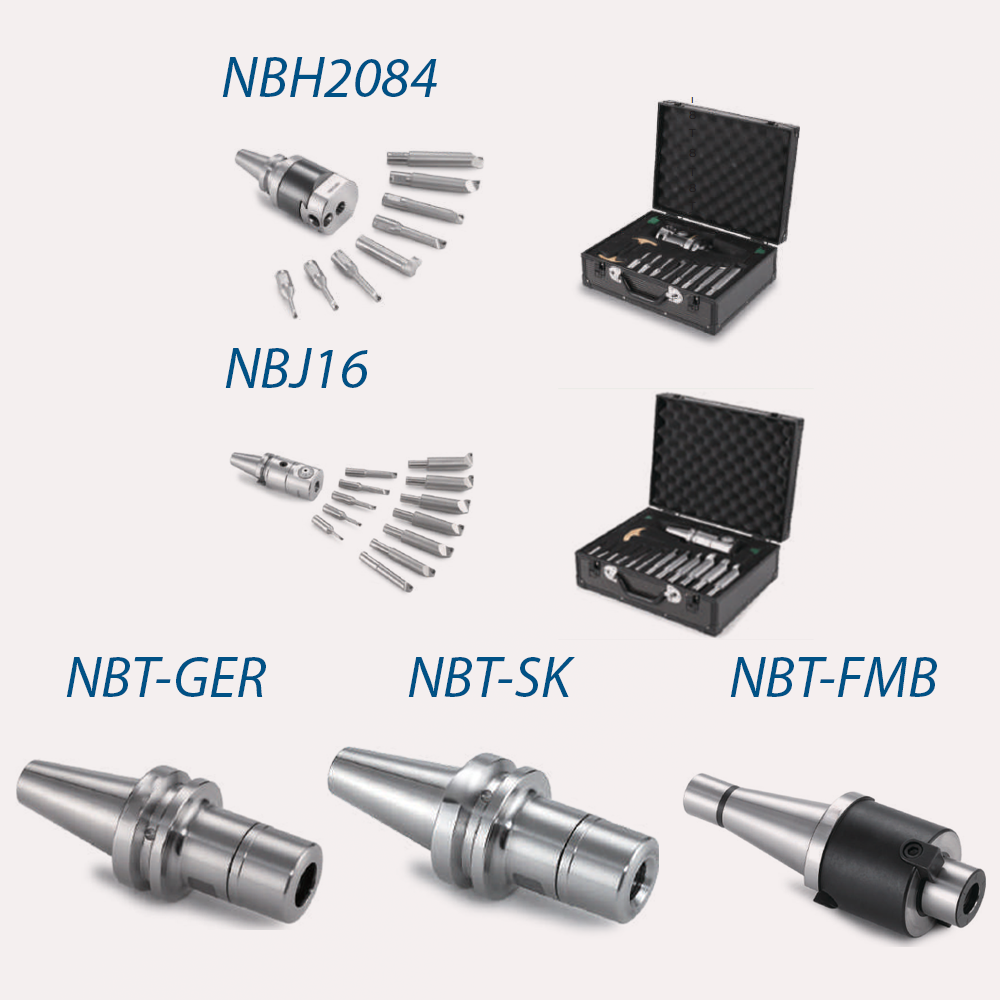
<style>
.page{position:relative;width:1000px;height:1000px;background:#f4efef}
.page>*{position:absolute;margin:0}
.t1{font:57.8px "MyriadPro-It";color:#005185}
</style>
<div class="page">
<p class="t1" style="left:222px;top:57px;width:215px;height:40px">NBH2084</p>
<p class="t1" style="left:225px;top:348px;width:143px;height:40px">NBJ16</p>
<p class="t1" style="left:66px;top:657px;width:200px;height:40px">NBT-GER</p>
<p class="t1" style="left:408px;top:657px;width:167px;height:40px">NBT-SK</p>
<p class="t1" style="left:730px;top:657px;width:207px;height:40px">NBT-FMB</p>
</div>
